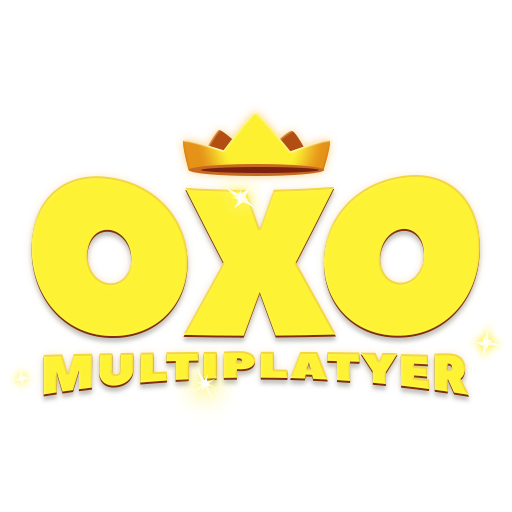
<style>
.page{position:relative;width:512px;height:512px;background:#ffffff}
.page>*{position:absolute;margin:0}
.t1{font:230px "PeaceSans";letter-spacing:-0.05em;color:#fff332;scale:0.87 1}
.t2{font:57.5px "PeaceSans";letter-spacing:0.025em;color:#fff332;scale:0.87 1}
</style>
<div class="page">
<p class="t1" style="left:31px;top:175px;width:449px;height:161px">OXO</p>
<p class="t2" style="left:43px;top:351px;width:426px;height:44px">MULTIPLATYER</p>
</div>
